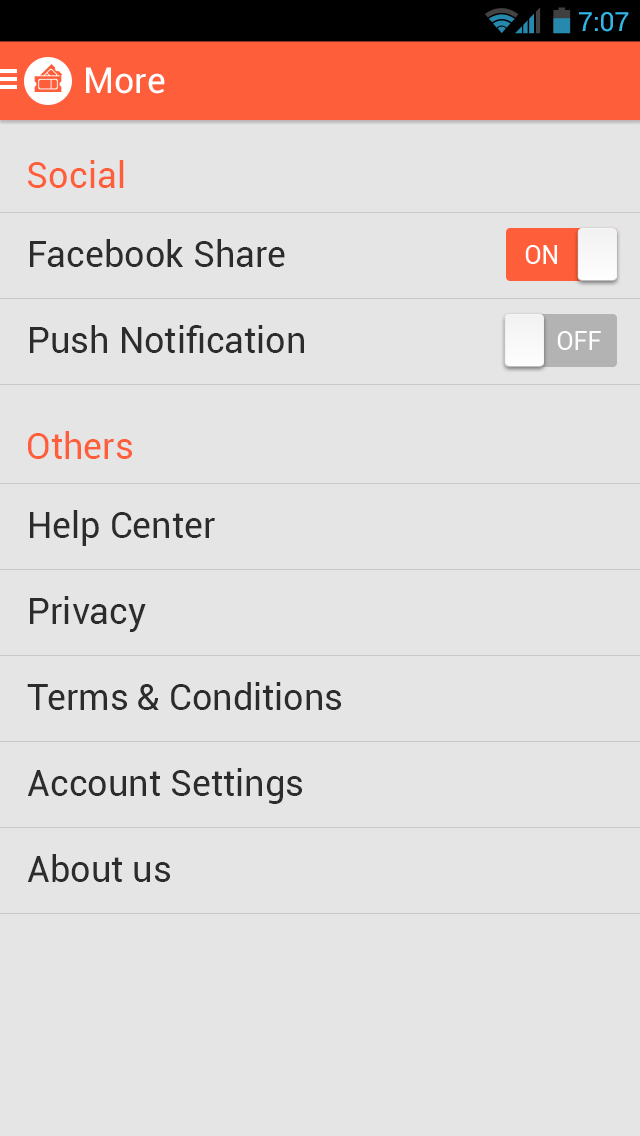
<style>
.page{position:relative;width:640px;height:1136px;background:#e5e5e5}
.page>*{position:absolute;margin:0}
.t1{font:26.6px "Roboto-Regular";color:#33b5e5}
.t2{font:35.8px "Roboto-Regular";color:#ffffff}
.t3{font:36px "Roboto-Regular";color:#ff5e3a}
.t4{font:36px "Roboto-Regular";color:#2c2c2c}
.t5{font:24.8px "Roboto-Regular";color:#ffffff}
</style>
<div class="page">
<p class="t1" style="left:579px;top:12px;width:50px;height:20px">7:07</p>
<p class="t2" style="left:86px;top:67px;width:79px;height:27px">More</p>
<p class="t3" style="left:28px;top:160px;width:96px;height:28px">Social</p>
<p class="t4" style="left:30px;top:239px;width:255px;height:28px">Facebook Share</p>
<p class="t5" style="left:525px;top:245px;width:32px;height:19px">ON</p>
<p class="t4" style="left:30px;top:325px;width:274px;height:28px">Push Notification</p>
<p class="t5" style="left:557px;top:331px;width:44px;height:19px">OFF</p>
<p class="t3" style="left:28px;top:431px;width:104px;height:28px">Others</p>
<p class="t4" style="left:30px;top:510px;width:185px;height:36px">Help Center</p>
<p class="t4" style="left:30px;top:596px;width:116px;height:36px">Privacy</p>
<p class="t4" style="left:27px;top:682px;width:314px;height:28px">Terms &amp; Conditions</p>
<p class="t4" style="left:27px;top:768px;width:275px;height:36px">Account Settings</p>
<p class="t4" style="left:27px;top:854px;width:143px;height:28px">About us</p>
</div>
